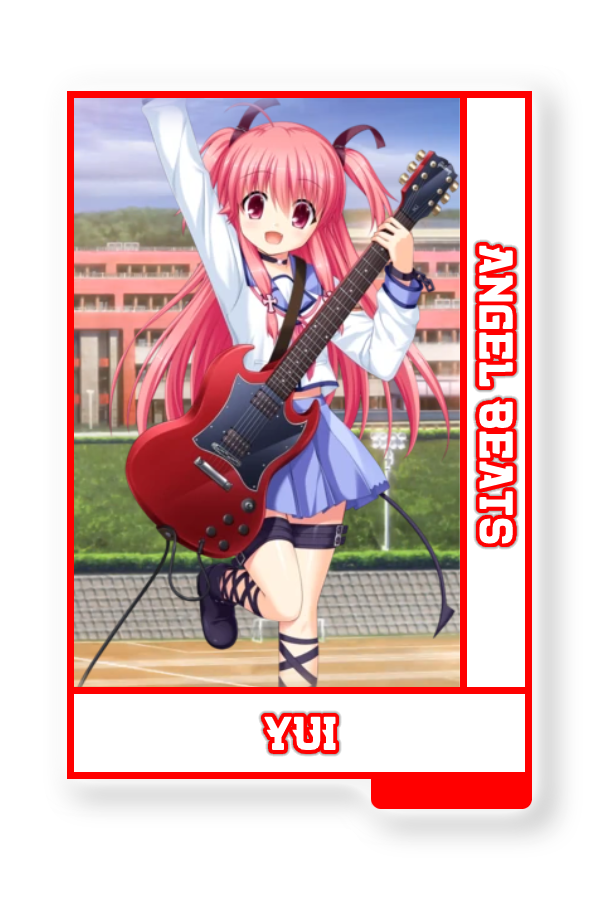
<style>
.page{position:relative;width:600px;height:900px;background:#ffffff}
.page>*{position:absolute;margin:0}
.t1{font:48.8px "KillerCollege";color:#ffffff}
.t2{font:48.6px "KillerCollege";color:#ffffff}
</style>
<div class="page">
<p class="t1" style="left:479px;top:245px;width:34px;height:299px;rotate:90deg">Angel Beats</p>
<p class="t2" style="left:264px;top:716px;width:72px;height:35px">YUI</p>
</div>
